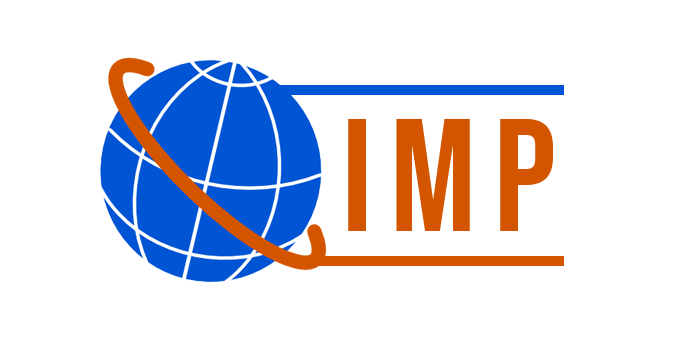
<style>
.page{position:relative;width:700px;height:350px;background:#ffffff}
.page>*{position:absolute;margin:0}
.t1{font:160px "BebasNeue-Regular";letter-spacing:0.11em;color:#d45500}
</style>
<div class="page">
<p class="t1" style="left:348px;top:118px;width:205px;height:113px">IMP</p>
</div>
